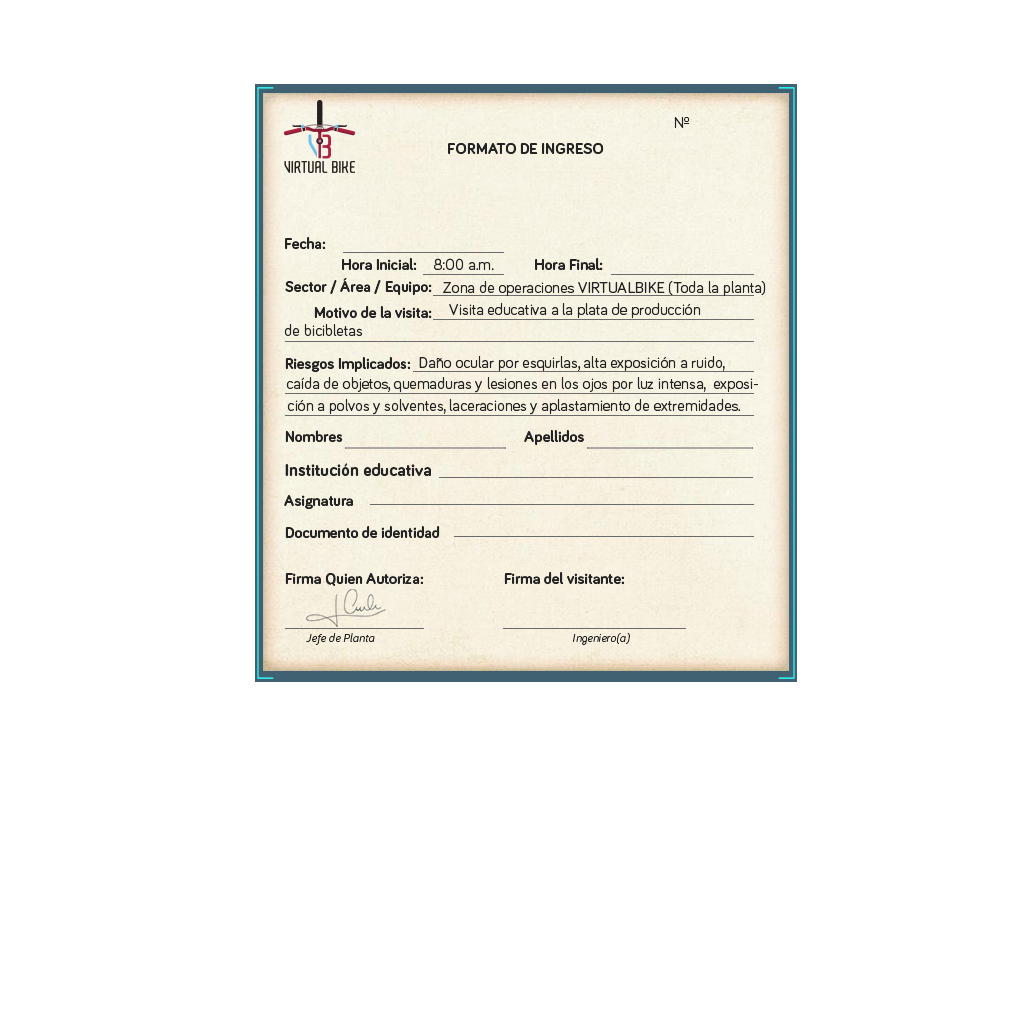
<style>
.page{position:relative;width:1024px;height:1024px;background:#ffffff}
.page>*{position:absolute;margin:0}
.t1{font:16px "Bariol-Regular";color:#242424}
.t2{font:16px "Bariol-Bold";color:#242424}
.t3{font:18px "Bariol-Bold";color:#242424}
.t4{font:12px "BariolRegular-Italic";color:#242424}
</style>
<div class="page">
<p class="t1" style="left:674px;top:117px;width:16px;height:11px">Nº</p>
<p class="t2" style="left:448px;top:143px;width:156px;height:11px">FORMATO DE INGRESO</p>
<p class="t2" style="left:285px;top:237px;width:41px;height:12px">Fecha:</p>
<p class="t2" style="left:342px;top:258px;width:75px;height:12px">Hora Inicial:</p>
<p class="t1" style="left:433px;top:258px;width:61px;height:12px">8:00 a.m.</p>
<p class="t2" style="left:535px;top:258px;width:68px;height:12px">Hora Final:</p>
<p class="t2" style="left:285px;top:278px;width:147px;height:17px">Sector / Área / Equipo:</p>
<p class="t1" style="left:443px;top:281px;width:323px;height:16px">Zona de operaciones VIRTUALBIKE (Toda la planta)</p>
<p class="t1" style="left:449px;top:303px;width:252px;height:16px">Visita educativa a la plata de producción</p>
<p class="t2" style="left:314px;top:306px;width:118px;height:12px">Motivo de la visita:</p>
<p class="t1" style="left:284px;top:324px;width:79px;height:12px">de bicibletas</p>
<p class="t2" style="left:285px;top:357px;width:126px;height:15px">Riesgos Implicados:</p>
<p class="t1" style="left:419px;top:356px;width:306px;height:16px">Daño ocular por esquirlas, alta exposición a ruido,</p>
<p class="t1" style="left:286px;top:377px;width:472px;height:16px">caída de objetos, quemaduras y lesiones en los ojos por luz intensa,  exposi-</p>
<p class="t1" style="left:287px;top:399px;width:454px;height:16px">ción a polvos y solventes, laceraciones y aplastamiento de extremidades.</p>
<p class="t2" style="left:285px;top:430px;width:58px;height:12px">Nombres</p>
<p class="t2" style="left:524px;top:430px;width:60px;height:15px">Apellidos</p>
<p class="t3" style="left:285px;top:463px;width:146px;height:13px">Institución educativa</p>
<p class="t2" style="left:284px;top:495px;width:69px;height:14px">Asignatura</p>
<p class="t2" style="left:285px;top:526px;width:155px;height:12px">Documento de identidad</p>
<p class="t2" style="left:285px;top:573px;width:139px;height:13px">Firma Quien Autoriza:</p>
<p class="t2" style="left:504px;top:572px;width:121px;height:12px">Firma del visitante:</p>
<p class="t4" style="left:306px;top:633px;width:69px;height:12px">Jefe de Planta</p>
<p class="t4" style="left:572px;top:633px;width:58px;height:12px">Ingeniero(a)</p>
</div>
